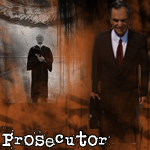
<style>
.page{position:relative;width:150px;height:150px}
.page>*{position:absolute;margin:0}
.t1{font:18px "junko-typewriter";color:#ffffff}
.t2{font:24px "junko-typewriter";color:#ffffff}
.t3{font:14px "junko-typewriter";color:#ffffff}
.t4{font:31px "junko-typewriter";color:#ffffff}
</style>
<div class="page">
<p class="t1" style="left:0px;top:126px;width:111px;height:23px"><span class="t2">P</span>ros<span class="t3">e</span><span class="t4">c</span>utor</p>
</div>
